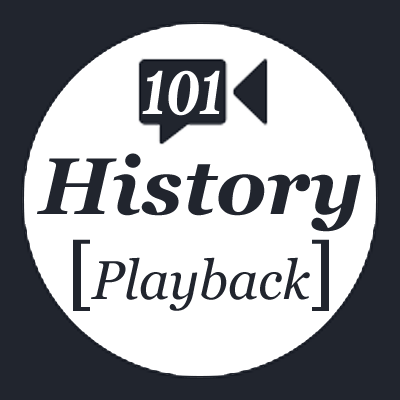
<style>
.page{position:relative;width:400px;height:400px;background:#ffffff}
.page>*{position:absolute;margin:0}
.t1{font:80px "Georgia-BoldItalic";color:#ffffff;scale:0.6 1}
.t2{font:80px "Georgia-BoldItalic";color:#21252e}
.t3{font:54.4px "Georgia-Italic";color:#21252e}
.t4{font:80px "Georgia-Bold";color:#21252e;scale:0.66 1}
</style>
<div class="page">
<p class="t1" style="left:142px;top:70px;width:78px;height:46px">101</p>
<p class="t2" style="left:37px;top:153px;width:324px;height:79px">History</p>
<p class="t3" style="left:73px;top:239px;width:256px;height:72px"><span class="t4">[</span>Playback<span class="t4">]</span></p>
</div>
